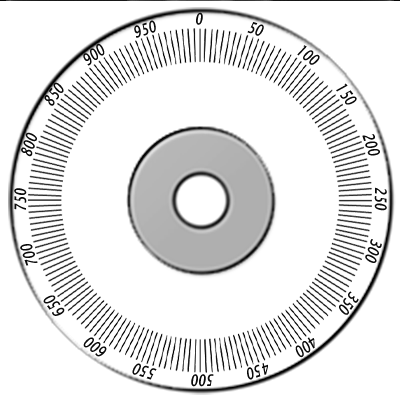
<style>
.page{position:relative;width:400px;height:400px;background:#ffffff}
.page>*{position:absolute;margin:0}
.t1{font:16.1px "LucidaSans-DemiItalic";letter-spacing:0.025em;scale:0.71 1}
</style>
<div class="page">
<p class="t1" style="left:196px;top:11px;width:7px;height:13px">0</p>
<p class="t1" style="left:134px;top:19px;width:22px;height:18px;rotate:-18deg">950</p>
<p class="t1" style="left:247px;top:21px;width:17px;height:14px;rotate:18deg">50</p>
<p class="t1" style="left:83px;top:42px;width:22px;height:23px;rotate:-36deg">900</p>
<p class="t1" style="left:297px;top:44px;width:23px;height:20px;rotate:36deg">100</p>
<p class="t1" style="left:44px;top:81px;width:20px;height:24px;rotate:-54deg">850</p>
<p class="t1" style="left:336px;top:82px;width:21px;height:22px;rotate:54deg">150</p>
<p class="t1" style="left:14px;top:187px;width:13px;height:22px;rotate:-90deg">750</p>
<p class="t1" style="left:374px;top:186px;width:13px;height:24px;rotate:90deg">250</p>
<p class="t1" style="left:365px;top:238px;width:17px;height:24px;rotate:108deg">300</p>
<p class="t1" style="left:43px;top:294px;width:22px;height:21px;rotate:-126deg">650</p>
<p class="t1" style="left:339px;top:290px;width:20px;height:24px;rotate:126deg">350</p>
<p class="t1" style="left:83px;top:336px;width:24px;height:20px;rotate:-144deg">600</p>
<p class="t1" style="left:295px;top:336px;width:20px;height:21px;rotate:144deg">400</p>
<p class="t1" style="left:132px;top:362px;width:25px;height:17px;rotate:-162deg">550</p>
<p class="t1" style="left:247px;top:362px;width:21px;height:17px;rotate:162deg">450</p>
<p class="t1" style="left:191px;top:373px;width:23px;height:13px;rotate:-180deg">500</p>
</div>
